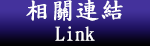
<style>
.page{position:relative;width:150px;height:46px}
.page>*{position:absolute;margin:0}
.t1{font:24px "DFKaiShu-SB-Estd-BF";letter-spacing:0.01em;color:#ffffff;font-weight:bold}
.t2{font:18.7px "DFKaiShu-SB-Estd-BF";letter-spacing:0.01em;color:#ffffff;font-weight:bold}
</style>
<div class="page">
<p class="t1" style="left:26px;top:0px;width:97px;height:41px;text-align:center">相關連結<br><span class="t2">Link</span></p>
</div>
